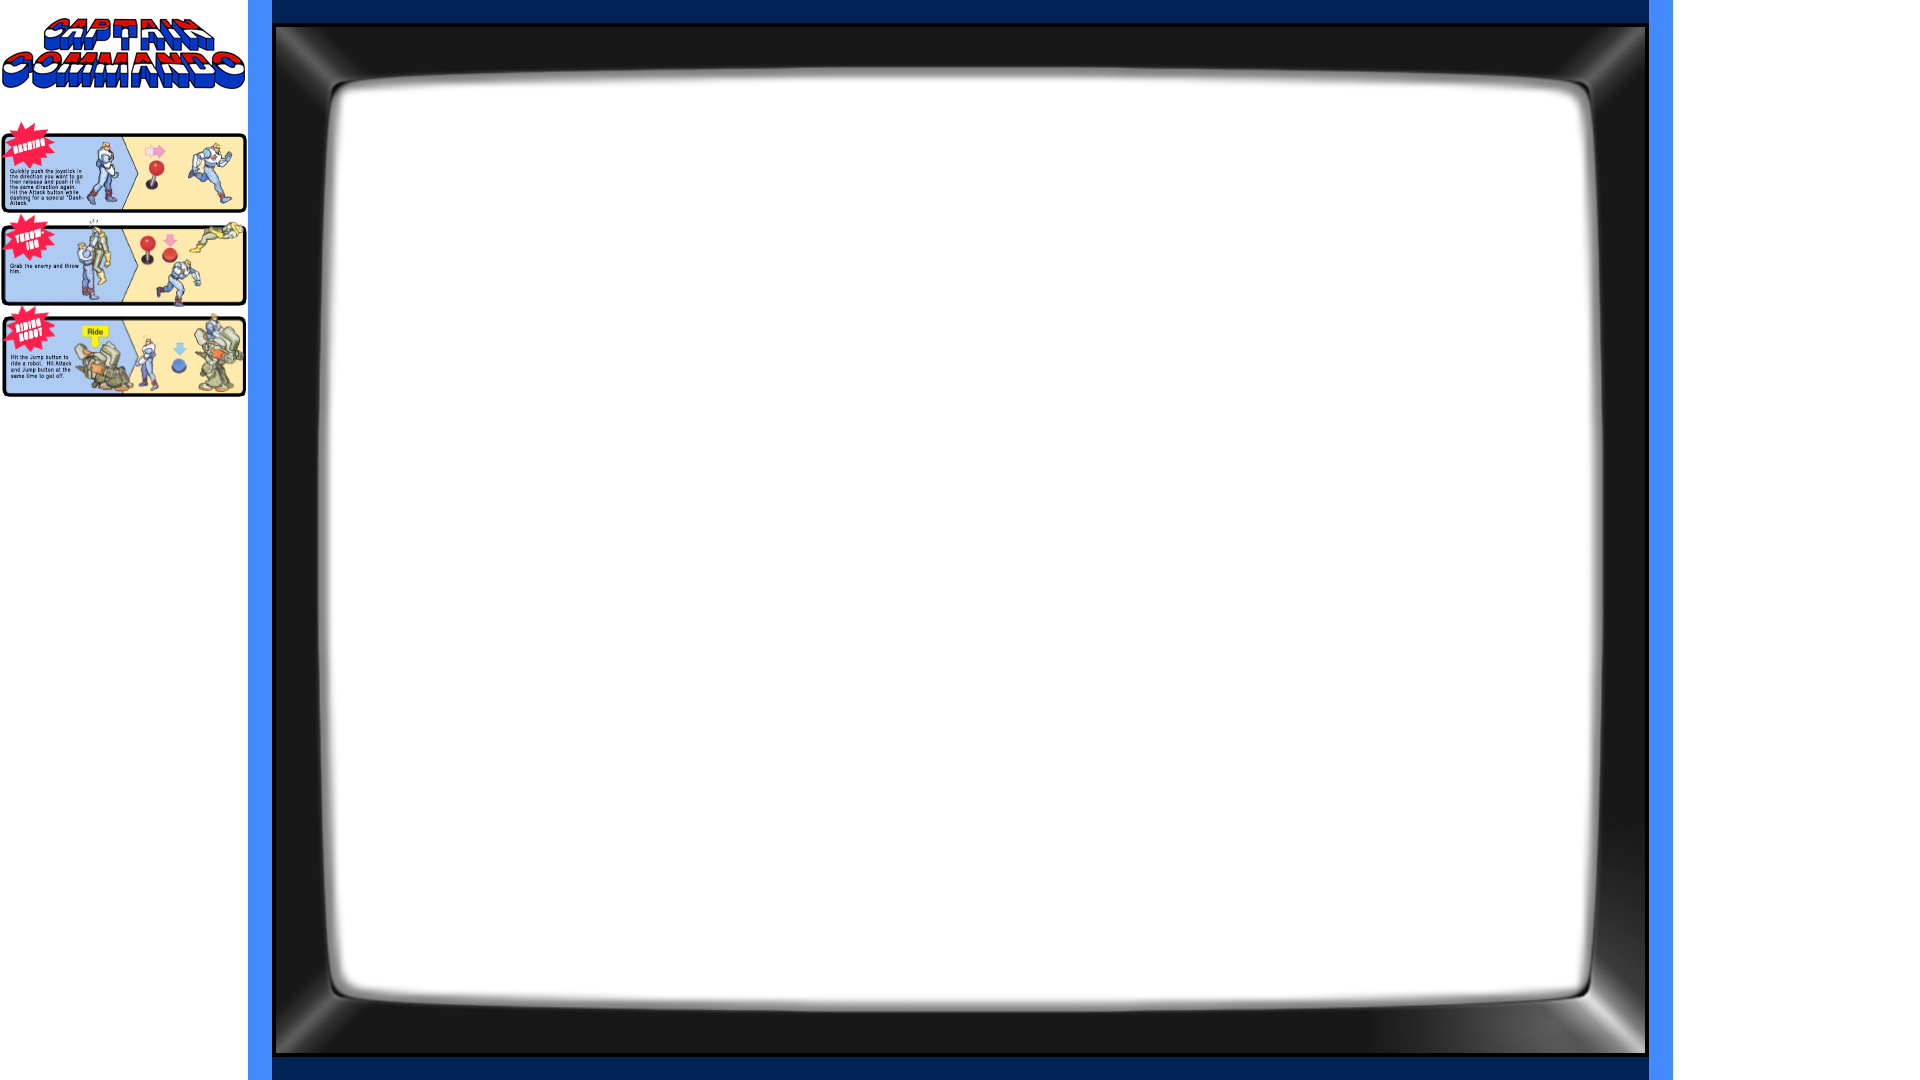
<style>
.page{position:relative;width:1920px;height:1080px;background:#ffffff}
.page>*{position:absolute;margin:0}
.t1{font:9.2px "Impact";letter-spacing:0.1em;color:#ffffff;font-weight:bold;font-style:italic;scale:0.81 1}
.t2{font:5.7px/5.3px "ArialMT";letter-spacing:0.1em;color:#000000;scale:0.85 1}
.t3{font:9.3px "Impact";letter-spacing:0.1em;color:#ffffff;font-weight:bold;font-style:italic;scale:0.81 1}
.t4{font:5.8px/5.3px "ArialMT";letter-spacing:0.1em;color:#000000;scale:0.84 1}
.t5{font:9.3px "Impact";letter-spacing:0.1em;color:#ffffff;font-weight:bold;font-style:italic;scale:0.8 1}
.t6{font:5.8px/6.2px "ArialMT";letter-spacing:0.1em;color:#000000;scale:0.83 1}
</style>
<div class="page">
<p class="t1" style="left:13px;top:138px;width:32px;height:16px;rotate:-16deg">DASHING</p>
<p class="t2" style="left:10px;top:168px;width:74px;height:37px">Quickly push the joystick in<br>the direction you want to go<br>then release and push it in<br>the same direction again.<br>Hit the Attack button while<br>dashing for a special “Dash-<br>Attack.”</p>
<p class="t3" style="left:15px;top:228px;width:29px;height:23px;text-align:center;rotate:-16deg">THROW-<br>ING</p>
<p class="t4" style="left:10px;top:263px;width:69px;height:11px">Grab the enemy and throw<br>him.</p>
<p class="t5" style="left:15px;top:318px;width:27px;height:24px;text-align:center;rotate:-16deg">RIDING<br>ROBOT</p>
<p class="t6" style="left:11px;top:354px;width:61px;height:26px">Hit the Jump button to<br>ride a robot.  Hit Attack<br>and Jump button at the<br>same time to get off.</p>
</div>
